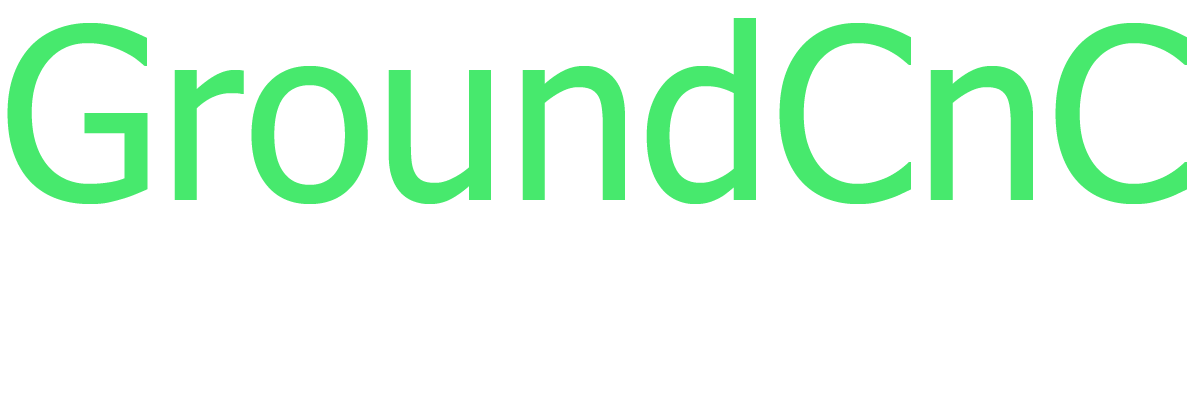
<style>
.page{position:relative;width:1200px;height:400px;background:#ffffff}
.page>*{position:absolute;margin:0}
.t1{font:238.3px "Tahoma";color:#47e96d}
</style>
<div class="page">
<p class="t1" style="left:7px;top:18px;width:1180px;height:186px">GroundCnC</p>
</div>
